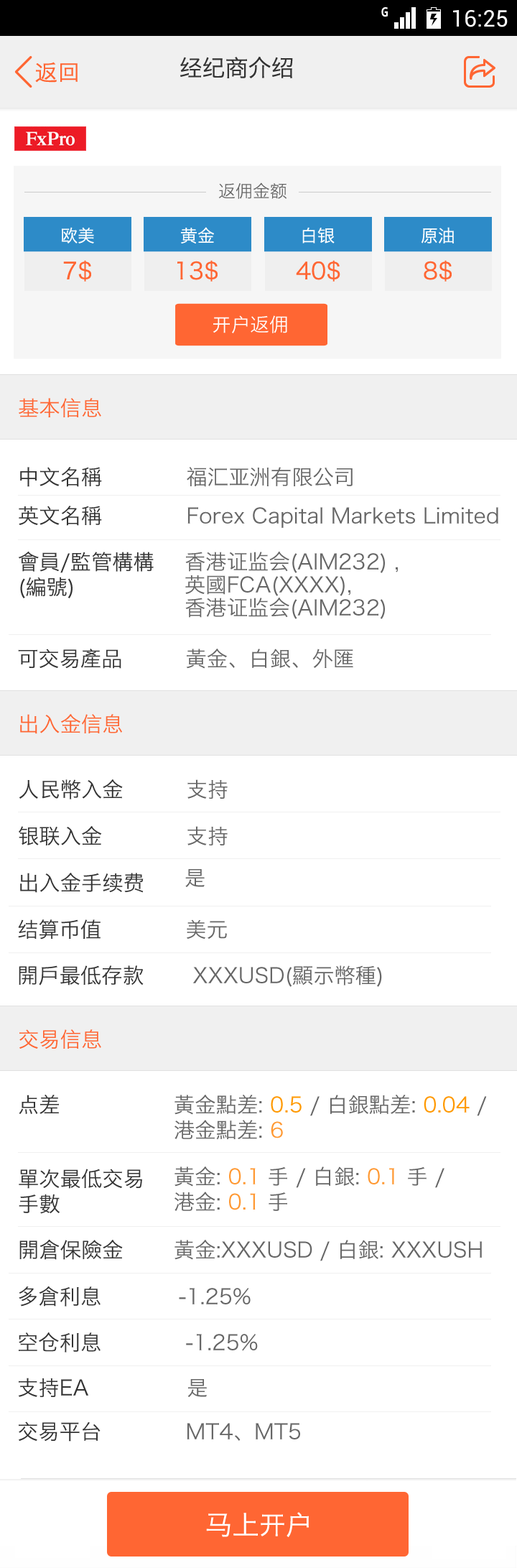
<style>
.page{position:relative;width:517px;height:1568px;background:#ffffff}
.page>*{position:absolute;margin:0}
.t1{font:23px "HiraginoSansGB-W3";color:#333333}
.t2{font:17.2px "HiraginoSansGB-W3";color:#666666}
.t3{font:17.2px "HiraginoSansGB-W3";color:#ffffff}
.t4{font:23px "HiraginoSansGB-W3";color:#ff6633}
.t5{font:19.2px "HiraginoSansGB-W3";color:#ffffff}
.t6{font:21.1px "HiraginoSansGB-W3";color:#ff6633}
.t7{font:21.1px "HiraginoSansGB-W3";color:#666666}
.t8{font:21.1px "HiraginoSansGB-W3";color:#333333}
.t9{font:21.1px/17.2px "HiraginoSansGB-W3";color:#333333}
.t10{font:21.1px/23px "HiraginoSansGB-W3";color:#666666}
.t11{font:21.1px "HiraginoSansGB-W3";color:#ff9900}
.t12{font:21.1px "HiraginoSansGB-W3";color:#ff9933}
.t13{font:26.8px "HiraginoSansGB-W3";color:#ffffff}
</style>
<div class="page">
<p class="t1" style="left:180px;top:56px;width:113px;height:22px">经纪商介绍</p>
<p class="t2" style="left:218px;top:182px;width:69px;height:17px">返佣金额</p>
<p class="t3" style="left:62px;top:227px;width:32px;height:16px">欧美</p>
<p class="t3" style="left:181px;top:227px;width:33px;height:17px">黄金</p>
<p class="t3" style="left:302px;top:227px;width:33px;height:16px">白银</p>
<p class="t3" style="left:422px;top:227px;width:32px;height:16px">原油</p>
<p class="t4" style="left:63px;top:260px;width:28px;height:22px">7$</p>
<p class="t4" style="left:177px;top:260px;width:41px;height:22px">13$</p>
<p class="t4" style="left:296px;top:260px;width:44px;height:22px">40$</p>
<p class="t4" style="left:424px;top:260px;width:28px;height:22px">8$</p>
<p class="t5" style="left:213px;top:315px;width:74px;height:18px">开户返佣</p>
<p class="t6" style="left:19px;top:398px;width:82px;height:19px">基本信息</p>
<p class="t7" style="left:20px;top:467px;width:333px;height:20px"><span class="t8">中文名稱            </span>福汇亚洲有限公司</p>
<p class="t7" style="left:19px;top:506px;width:479px;height:22px"><span class="t8">英文名稱            </span>Forex Capital Markets Limited</p>
<p class="t9" style="left:18px;top:551px;width:136px;height:47px">會員/監管構構<br>(編號)</p>
<p class="t10" style="left:185px;top:551px;width:213px;height:68px">香港证监会(AIM232) , <br>英國FCA(XXXX),<br>香港证监会(AIM232)</p>
<p class="t7" style="left:18px;top:649px;width:335px;height:20px"><span class="t8">可交易產品         </span>黃金、白銀、外匯</p>
<p class="t6" style="left:20px;top:714px;width:102px;height:20px">出入金信息</p>
<p class="t8" style="left:19px;top:779px;width:209px;height:20px">人民幣入金         <span class="t7">支持</span></p>
<p class="t8" style="left:19px;top:826px;width:209px;height:19px">银联入金            <span class="t7">支持</span></p>
<p class="t7" style="left:185px;top:869px;width:20px;height:18px">是</p>
<p class="t8" style="left:20px;top:873px;width:124px;height:20px">出入金手续费</p>
<p class="t8" style="left:18px;top:919px;width:209px;height:21px">结算币值            <span class="t7">美元</span></p>
<p class="t7" style="left:19px;top:965px;width:363px;height:22px"><span class="t8">開戶最低存款       </span>XXXUSD(顯示幣種)</p>
<p class="t6" style="left:19px;top:1029px;width:82px;height:20px">交易信息</p>
<p class="t8" style="left:19px;top:1095px;width:40px;height:19px">点差</p>
<p class="t7" style="left:175px;top:1095px;width:312px;height:45px">黃金點差: <span class="t11">0.5 </span>/ 白銀點差: <span class="t11">0.04 </span>/<br>港金點差: <span class="t12">6</span></p>
<p class="t8" style="left:19px;top:1169px;width:123px;height:45px">單次最低交易<br>手數</p>
<p class="t7" style="left:175px;top:1166px;width:270px;height:45px">黃金: <span class="t12">0.1</span> 手 / 白銀: <span class="t12">0.1</span> 手 / <br>港金: <span class="t12">0.1 </span>手</p>
<p class="t8" style="left:19px;top:1239px;width:104px;height:21px">開倉保險金</p>
<p class="t7" style="left:175px;top:1240px;width:307px;height:21px">黃金:XXXUSD / 白銀: XXXUSH</p>
<p class="t7" style="left:19px;top:1286px;width:232px;height:21px"><span class="t8">多倉利息           </span>-1.25%</p>
<p class="t7" style="left:19px;top:1332px;width:239px;height:21px"><span class="t8">空仓利息            </span>-1.25%</p>
<p class="t8" style="left:18px;top:1378px;width:189px;height:19px">支持EA              <span class="t7">是</span></p>
<p class="t7" style="left:19px;top:1421px;width:281px;height:21px"><span class="t8">交易平台            </span>MT4、MT5</p>
<p class="t13" style="left:206px;top:1512px;width:103px;height:25px">马上开户</p>
</div>
